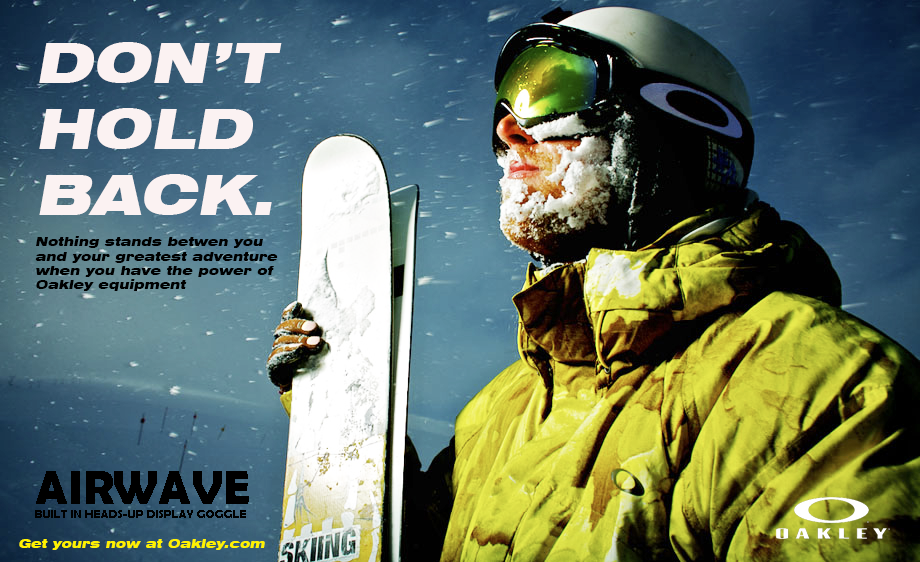
<style>
.page{position:relative;width:920px;height:562px}
.page>*{position:absolute;margin:0}
.t1{font:12px "Swiss721BT-BlackExtended";color:#000000;font-style:italic}
.t2{font:55px "Swiss721BT-BlackExtended";color:#fbf2f2;font-style:italic}
.t3{font:14px "Swiss721BT-BlackExtended";color:#000000;font-style:italic}
.t4{font:12px "BerlinSansFBDemi-Bold";color:#000000}
.t5{font:48px "BerlinSansFBDemi-Bold";color:#000000}
.t6{font:12px "Swiss721BT-BlackExtended";color:#fff200;font-style:italic}
</style>
<div class="page">
<p class="t1" style="left:35px;top:42px;width:247px;height:249px"><span class="t2">DON’T <br>HOLD <br>BACK.<br></span><span class="t3"><br></span>Nothing stands betwen you <br>and your greatest adventure<br>when you have the power of <br>Oakley equipment</p>
<p class="t4" style="left:35px;top:471px;width:214px;height:47px"><span class="t5">AIRWAVE<br></span>BUILT IN HEADS-UP DISPLAY GOGGLE</p>
<p class="t6" style="left:19px;top:539px;width:246px;height:11px">Get yours now at Oakley.com</p>
</div>
